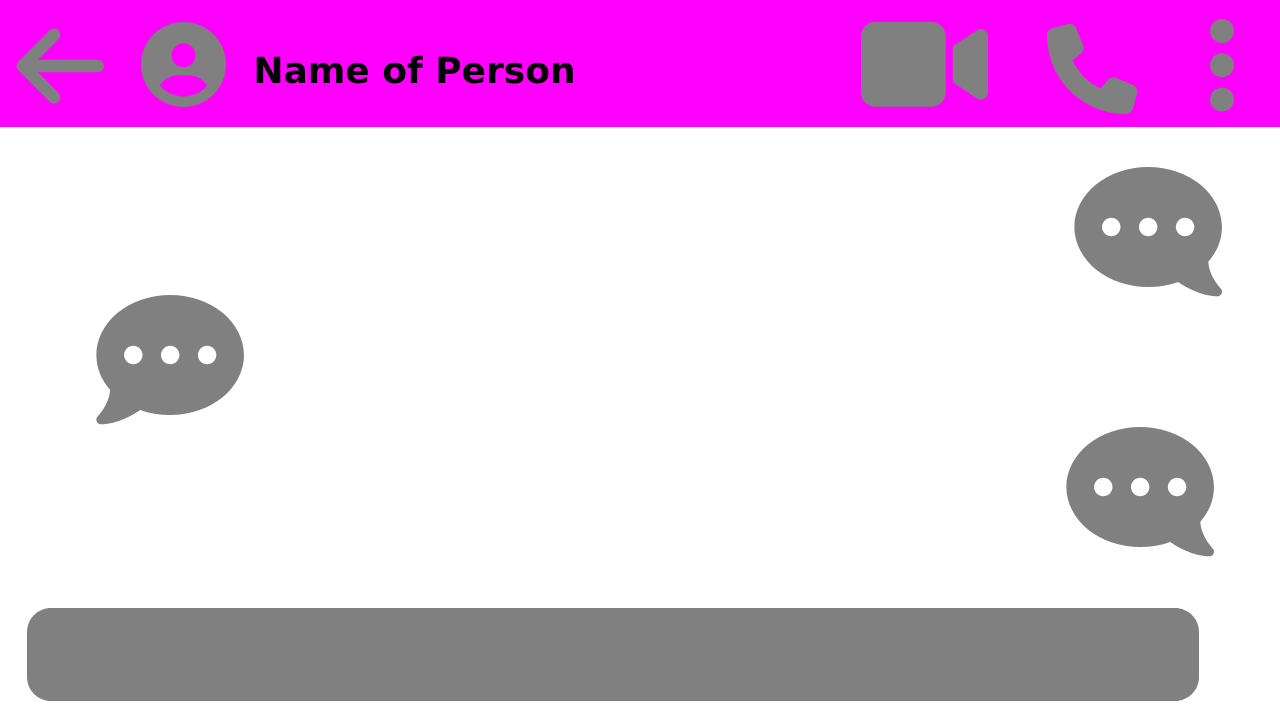
<style>
.page{position:relative;width:1280px;height:720px;background:#ffffff}
.page>*{position:absolute;margin:0}
.t1{font:36px "DejaVuSans-Bold";color:#000000}
</style>
<div class="page">
<p class="t1" style="left:256px;top:55px;width:317px;height:29px">Name of Person</p>
</div>
